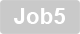
<style>
.page{position:relative;width:80px;height:34px;background:#c9c9c9}
.page>*{position:absolute;margin:0}
.t1{font:22.1px "Arial-BoldMT";color:#ffffff}
</style>
<div class="page">
<p class="t1" style="left:14px;top:8px;width:51px;height:16px">Job5</p>
</div>
